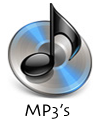
<style>
.page{position:relative;width:100px;height:122px;background:#ffffff}
.page>*{position:absolute;margin:0}
.t1{font:17.7px "Skia-Regular";color:#000000}
</style>
<div class="page">
<p class="t1" style="left:25px;top:103px;width:45px;height:16px">MP3’s</p>
</div>
